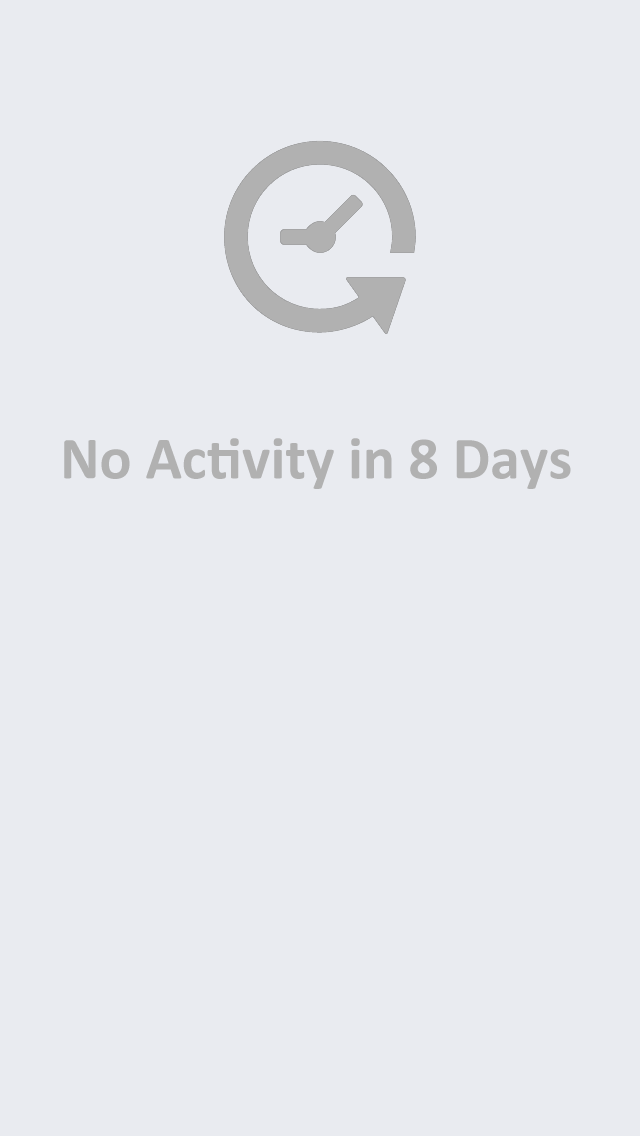
<style>
.page{position:relative;width:640px;height:1136px;background:#e9ebf0}
.page>*{position:absolute;margin:0}
.t1{font:60px "Calibri-Bold";color:#b1b1b1}
</style>
<div class="page">
<p class="t1" style="left:64px;top:438px;width:507px;height:51px">No Activity in 8 Days</p>
</div>
